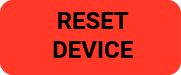
<style>
.page{position:relative;width:181px;height:75px;background:#ff3828}
.page>*{position:absolute;margin:0}
.t1{font:24px "Roboto-Bold";color:#000000}
</style>
<div class="page">
<p class="t1" style="left:53px;top:12px;width:80px;height:46px;text-align:center">RESET DEVICE</p>
</div>
